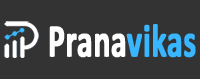
<style>
.page{position:relative;width:200px;height:79px;background:#333333}
.page>*{position:absolute;margin:0}
.t1{font:47px "Calibri-Bold";color:#ffffff;font-weight:bold;scale:0.67 1}
.t2{font:47px "Calibri-Bold";color:#38b6ff;font-weight:bold;scale:0.67 1}
</style>
<div class="page">
<p class="t1" style="left:49px;top:24px;width:147px;height:34px">Prana<span class="t2">vikas</span></p>
</div>
